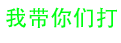
<style>
.page{position:relative;width:121px;height:43px;background:#ffffff}
.page>*{position:absolute;margin:0}
.t1{font:22px "AdobeHeitiStd-Regular";letter-spacing:0.03em;color:#00ff12}
</style>
<div class="page">
<p class="t1" style="left:6px;top:7px;width:111px;height:21px">我带你们打</p>
</div>
